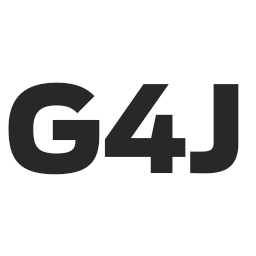
<style>
.page{position:relative;width:256px;height:256px;background:#ffffff}
.page>*{position:absolute;margin:0}
.t1{font:120px "Antenna-Black";color:#282828}
</style>
<div class="page">
<p class="t1" style="left:8px;top:82px;width:231px;height:93px">G4J</p>
</div>
